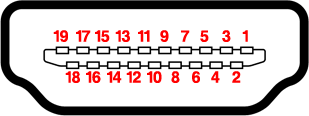
<style>
.page{position:relative;width:309px;height:116px;background:#ffffff}
.page>*{position:absolute;margin:0}
.t1{font:16px "Helvetica-Bold";letter-spacing:-0.08em;color:#ff0000}
</style>
<div class="page">
<p class="t1" style="left:53px;top:30px;width:15px;height:12px">19</p>
<p class="t1" style="left:76px;top:30px;width:15px;height:12px">17</p>
<p class="t1" style="left:95px;top:30px;width:15px;height:12px">15</p>
<p class="t1" style="left:115px;top:30px;width:15px;height:12px">13</p>
<p class="t1" style="left:138px;top:30px;width:12px;height:12px">11</p>
<p class="t1" style="left:160px;top:30px;width:9px;height:12px">9</p>
<p class="t1" style="left:181px;top:30px;width:9px;height:12px">7</p>
<p class="t1" style="left:200px;top:30px;width:9px;height:12px">5</p>
<p class="t1" style="left:222px;top:30px;width:9px;height:12px">3</p>
<p class="t1" style="left:242px;top:30px;width:6px;height:12px">1</p>
<p class="t1" style="left:65px;top:71px;width:15px;height:12px">18</p>
<p class="t1" style="left:86px;top:71px;width:15px;height:12px">16</p>
<p class="t1" style="left:107px;top:71px;width:15px;height:12px">14</p>
<p class="t1" style="left:126px;top:71px;width:15px;height:12px">12</p>
<p class="t1" style="left:147px;top:71px;width:15px;height:12px">10</p>
<p class="t1" style="left:171px;top:71px;width:9px;height:12px">8</p>
<p class="t1" style="left:192px;top:71px;width:8px;height:12px">6</p>
<p class="t1" style="left:211px;top:71px;width:9px;height:12px">4</p>
<p class="t1" style="left:232px;top:71px;width:9px;height:12px">2</p>
</div>
